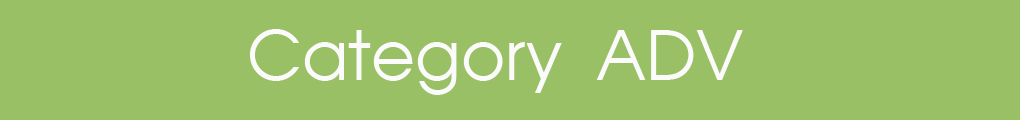
<style>
.page{position:relative;width:1020px;height:120px;background:#9ac065}
.page>*{position:absolute;margin:0}
.t1{font:67.7px "AGAvantGardeCyrBook";color:#fbfbfb}
</style>
<div class="page">
<p class="t1" style="left:250px;top:29px;width:493px;height:66px">Category ADV</p>
</div>
